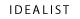
<style>
.page{position:relative;width:80px;height:19px;background:#ffffff}
.page>*{position:absolute;margin:0}
.t1{font:12.7px "MyriadPro-Regular";letter-spacing:0.15em;color:#000000;text-transform:uppercase}
</style>
<div class="page">
<p class="t1" style="left:10px;top:5px;width:59px;height:9px">IDEALIST</p>
</div>
